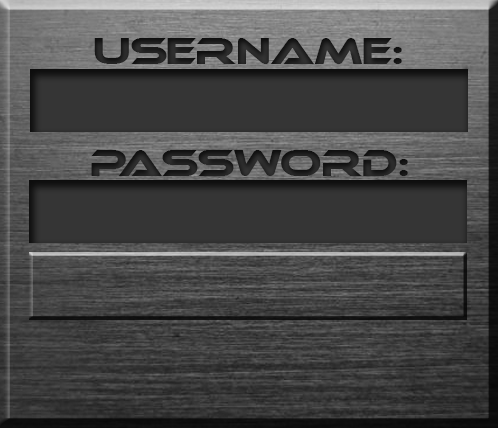
<style>
.page{position:relative;width:498px;height:428px}
.page>*{position:absolute;margin:0}
.t1{font:36px "Ethnocentric";color:#353535}
.t2{font:36px "Ethnocentric";color:#202020}
</style>
<div class="page">
<p class="t1" style="left:94px;top:38px;width:308px;height:26px">USERNAME:</p>
<p class="t2" style="left:91px;top:150px;width:317px;height:26px">PASSWORD:</p>
</div>
